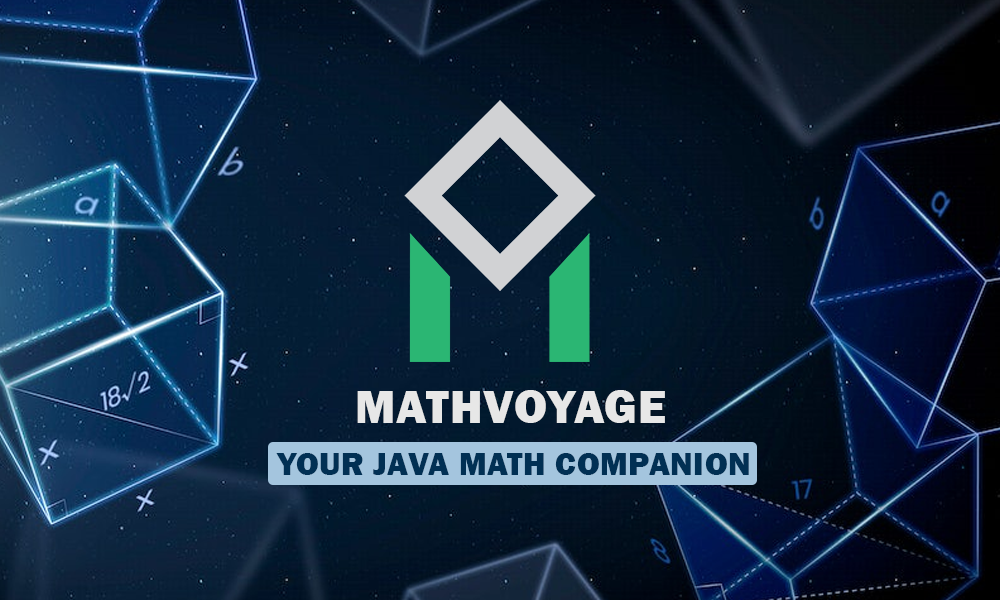
<style>
.page{position:relative;width:1000px;height:600px}
.page>*{position:absolute;margin:0}
.t1{font:48px "FranklinGothic-Heavy";letter-spacing:0.02em;color:#e7e7e7;text-transform:uppercase}
.t2{font:32.9px "FranklinGothic-Heavy";letter-spacing:0.02em;color:#013054}
</style>
<div class="page">
<p class="t1" style="left:357px;top:390px;width:308px;height:33px">MATHVOYAGE</p>
<p class="t2" style="left:276px;top:453px;width:473px;height:22px">YOUR JAVA MATH COMPANION</p>
</div>
